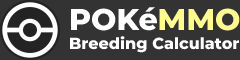
<style>
.page{position:relative;width:240px;height:60px;background:#333333}
.page>*{position:absolute;margin:0}
.t1{font:16px "Montserrat-ExtraBold";color:#ffffff}
.t2{font:30px "Montserrat-ExtraBold";color:#ffffff}
.t3{font:30px "Montserrat-ExtraBold";color:#fffa91}
</style>
<div class="page">
<p class="t1" style="left:70px;top:7px;width:170px;height:46px"><span class="t2">POKé</span><span class="t3">MMO<br></span>Breeding Calculator</p>
</div>
